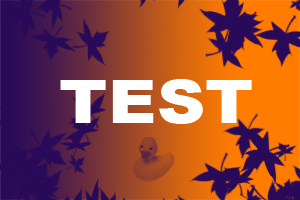
<style>
.page{position:relative;width:300px;height:200px}
.page>*{position:absolute;margin:0}
.t1{font:60px "Arial-Black";color:#ffffff;scale:1.12 1}
</style>
<div class="page">
<p class="t1" style="left:60px;top:79px;width:192px;height:45px">TEST</p>
</div>
